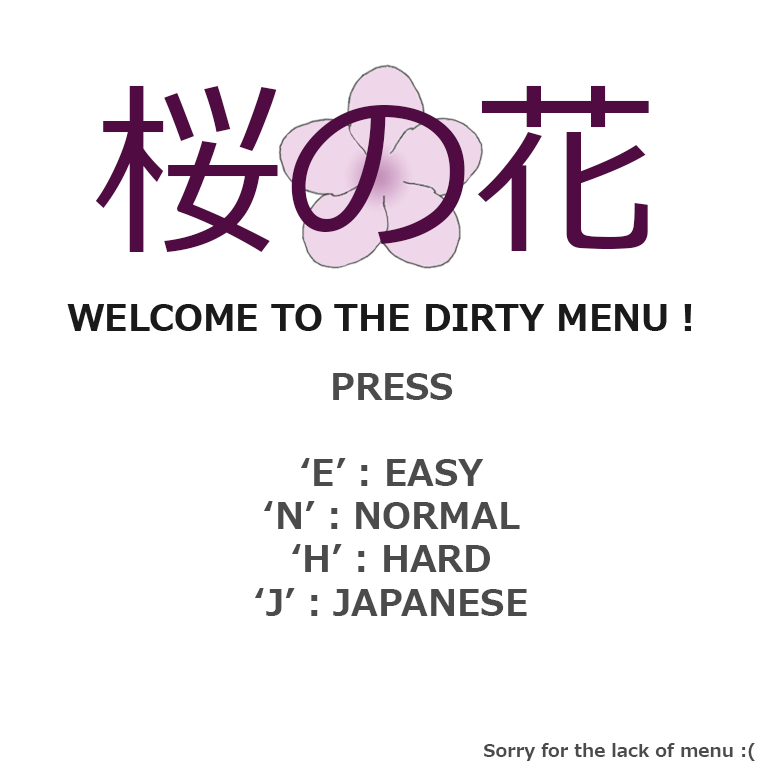
<style>
.page{position:relative;width:768px;height:768px;background:#ffffff}
.page>*{position:absolute;margin:0}
.t1{font:36px "Meiryo-Bold";color:#4b4b4b}
.t2{font:18px "Meiryo-Bold";color:#4b4b4b}
</style>
<div class="page">
<p class="t1" style="left:255px;top:373px;width:272px;height:243px;text-align:center">PRESS<br><br>‘E’ : EASY<br>‘N’ : NORMAL<br>‘H’ : HARD<br>‘J’ : JAPANESE</p>
<p class="t2" style="left:484px;top:743px;width:271px;height:18px">Sorry for the lack of menu :(</p>
</div>
